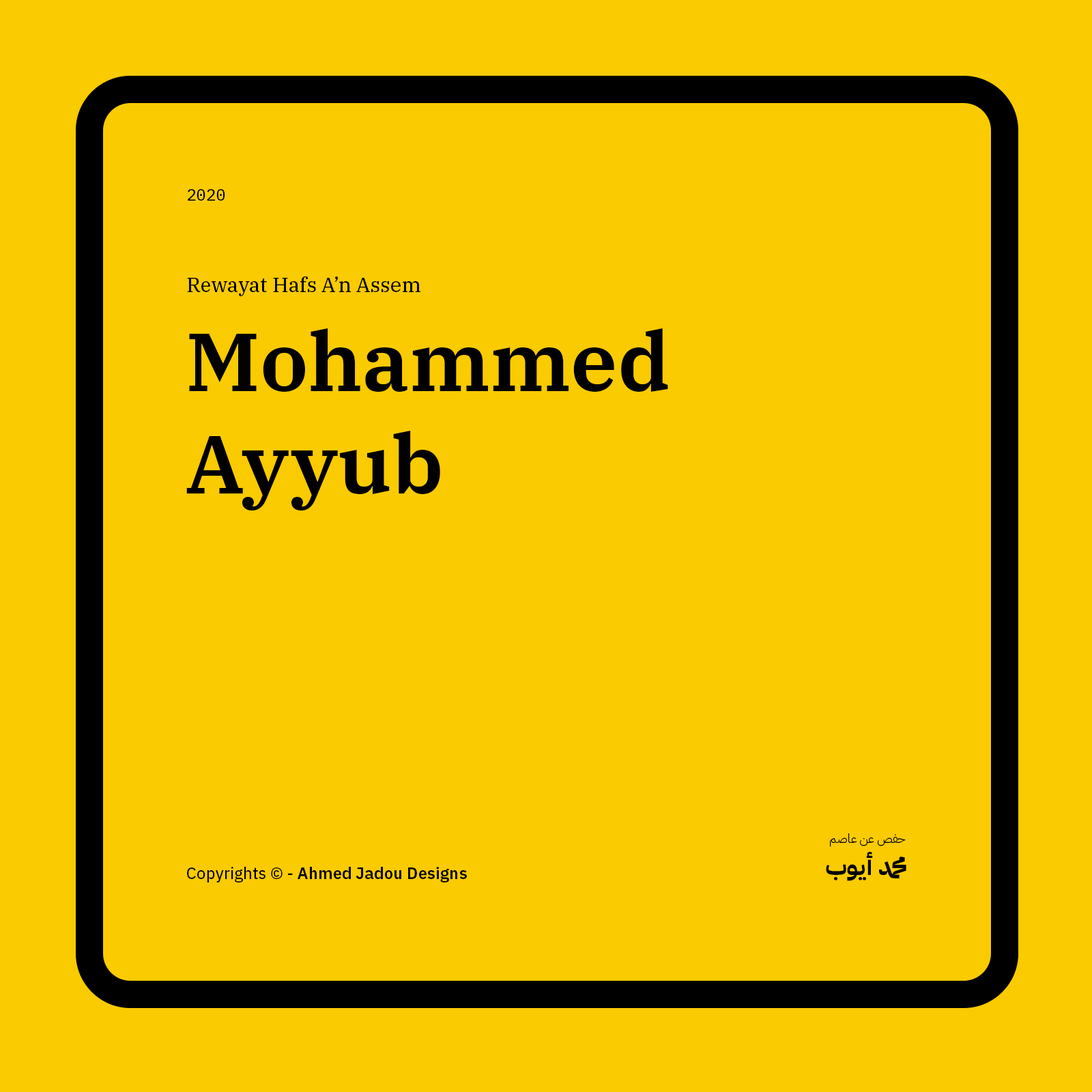
<style>
.page{position:relative;width:1092px;height:1092px;background:#facb00}
.page>*{position:absolute;margin:0}
.t1{font:16.4px "IBMPlexMono-Text";color:#000000}
.t2{font:20.5px "IBMPlexSerif-Text";color:#000000}
.t3{font:81.9px/102.7px "IBMPlexSerif-SemiBold";color:#000000}
.t4{font:12.3px "IBMPlexArabic-Light";color:#000000}
.t5{font:24.6px "IBMPlexArabic-Bold";color:#000000}
.t6{font:16.4px "IBMPlexSans-SemiBold";color:#000000}
.t7{font:16.4px "IBMPlexSans-Text";color:#000000}
</style>
<div class="page">
<p class="t1" style="left:188px;top:189px;width:37px;height:12px">2020</p>
<p class="t2" style="left:187px;top:276px;width:233px;height:20px">Rewayat Hafs A’n Assem</p>
<p class="t3" style="left:186px;top:328px;width:482px;height:183px">Mohammed Ayyub</p>
<p class="t4" style="left:830px;top:833px;width:76px;height:14px">حفص عن عاصم</p>
<p class="t5" style="left:826px;top:852px;width:80px;height:29px">محمد أيوب</p>
<p class="t6" style="left:187px;top:867px;width:280px;height:15px"><span class="t7">Copyrights © - </span>Ahmed Jadou Designs</p>
</div>
